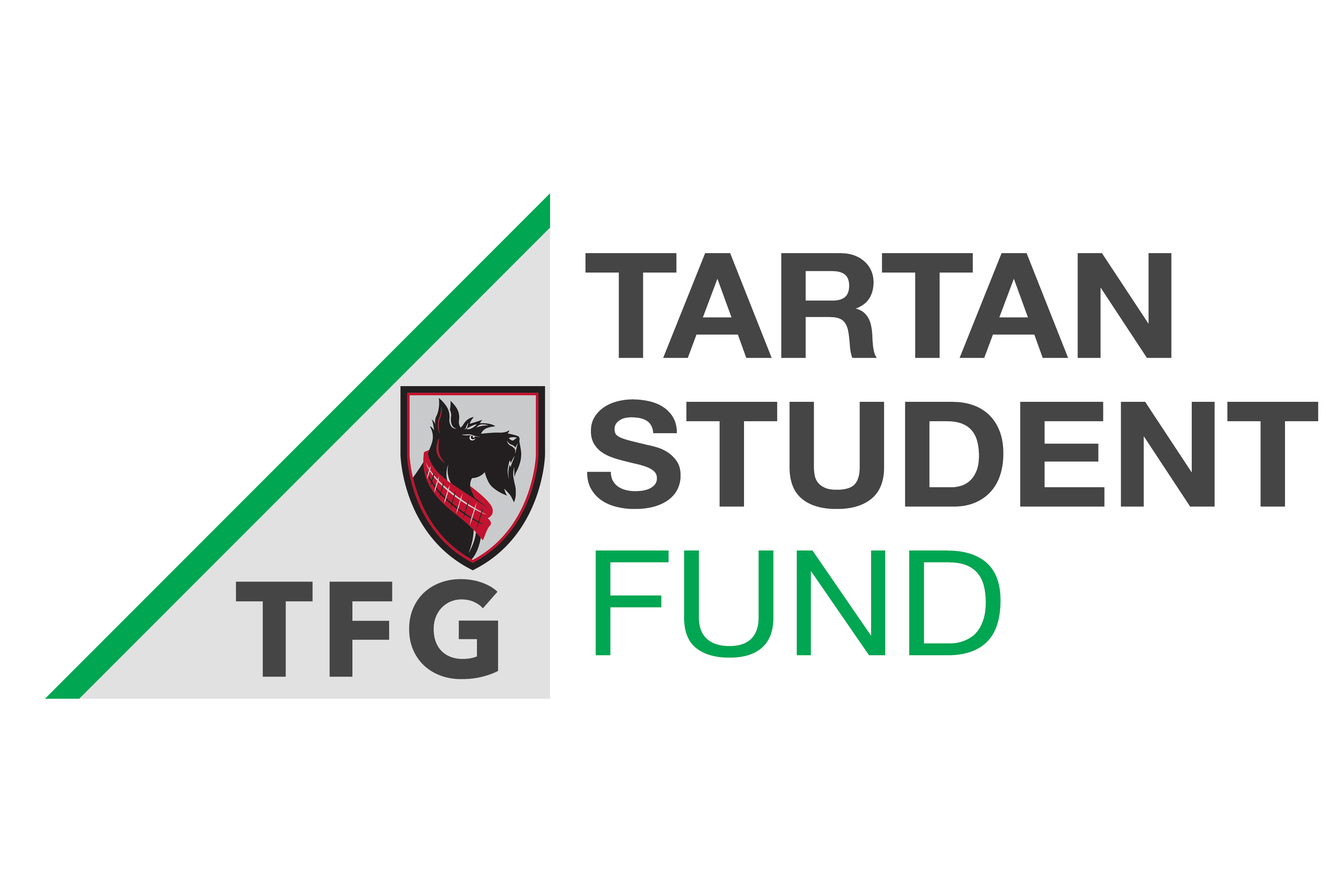
<style>
.page{position:relative;width:1337px;height:892px;background:#ffffff}
.page>*{position:absolute;margin:0}
.t1{font:146.5px/148.6px "HelveticaNeue-Bold";color:#454545;scale:1.06 1}
.t2{font:146.5px/148.6px "HelveticaNeue";color:#00a651;scale:1.06 1}
.t3{font:134.2px "AvenirNext-Bold";letter-spacing:0.05em;color:#454545}
</style>
<div class="page">
<p class="t1" style="left:585px;top:253px;width:734px;height:405px">TARTAN<br>STUDENT<br><span class="t2">FUND</span></p>
<p class="t3" style="left:236px;top:579px;width:262px;height:100px">TFG</p>
</div>
